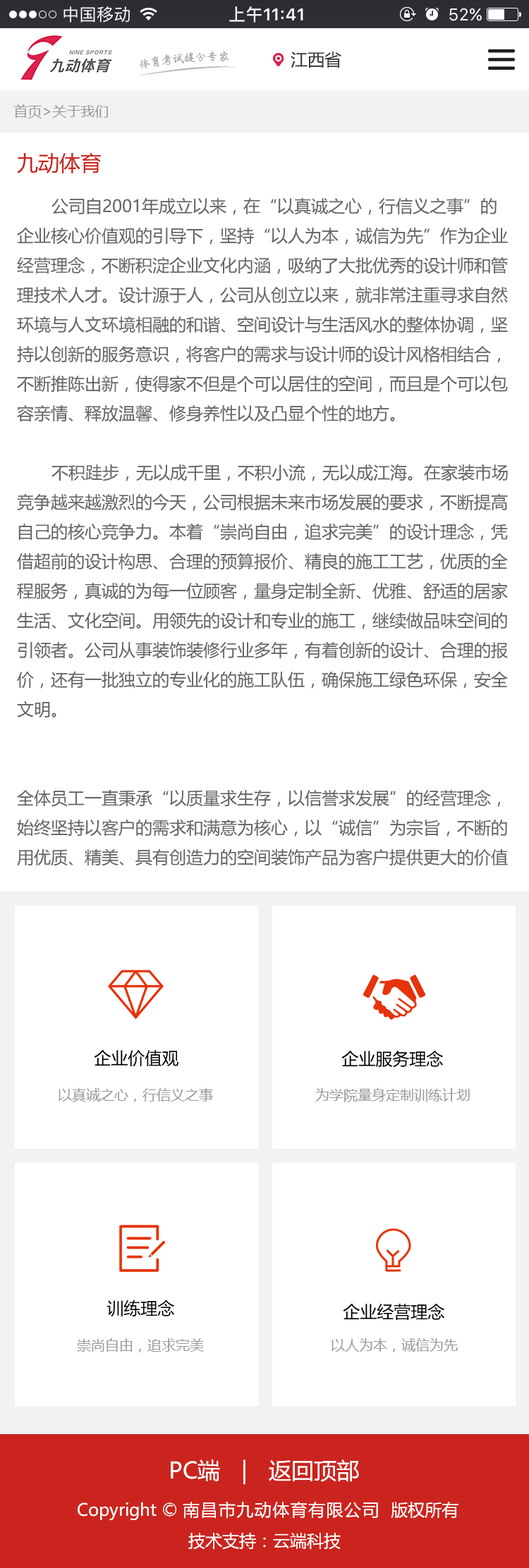
<style>
.page{position:relative;width:529px;height:1568px;background:#ffffff}
.page>*{position:absolute;margin:0}
.t1{font:11.3px "PensinkaiEG-Medium-GB";color:#8e8e8e}
.t2{font:16.9px "MicrosoftYaHei";color:#333333}
.t3{font:14.1px "MicrosoftYaHei";color:#989898}
.t4{font:21.1px "MicrosoftYaHei";color:#cb241e;text-transform:uppercase}
.t5{font:16.9px "MicrosoftYaHei";color:#666666;text-transform:uppercase}
.t6{font:16.9px "MicrosoftYaHei";color:#000000;text-transform:uppercase}
.t7{font:14.1px "MicrosoftYaHei";color:#999999;text-transform:uppercase}
.t8{font:22.6px "MicrosoftYaHei";color:#ffffff}
.t9{font:16.9px "MicrosoftYaHei";color:#ffffff}
.t10{font:16.9px "MicrosoftYaHei";letter-spacing:0.06em;color:#ffffff}
</style>
<div class="page">
<p class="t1" style="left:139px;top:51px;width:89px;height:17px;rotate:4deg">体育考试提分专家</p>
<p class="t2" style="left:290px;top:51px;width:51px;height:17px">江西省</p>
<p class="t3" style="left:13px;top:104px;width:95px;height:14px">首页&gt;关于我们</p>
<p class="t4" style="left:17px;top:153px;width:84px;height:20px">九动体育</p>
<p class="t5" style="left:17px;top:197px;width:490px;height:669px">公司自2001年成立以来，在“以真诚之心，行信义之事”的企业核心价值观的引导下，坚持“以人为本，诚信为先”作为企业经营理念，不断积淀企业文化内涵，吸纳了大批优秀的设计师和管理技术人才。设计源于人，公司从创立以来，就非常注重寻求自然环境与人文环境相融的和谐、空间设计与生活风水的整体协调，坚持以创新的服务意识，将客户的需求与设计师的设计风格相结合，不断推陈出新，使得家不但是个可以居住的空间，而且是个可以包容亲情、释放温馨、修身养性以及凸显个性的地方。<br><br>       不积跬步，无以成千里，不积小流，无以成江海。在家装市场竞争越来越激烈的今天，公司根据未来市场发展的要求，不断提高自己的核心竞争力。本着“崇尚自由，追求完美”的设计理念，凭借超前的设计构思、合理的预算报价、精良的施工工艺，优质的全程服务，真诚的为每一位顾客，量身定制全新、优雅、舒适的居家生活、文化空间。用领先的设计和专业的施工，继续做品味空间的引领者。公司从事装饰装修行业多年，有着创新的设计、合理的报价，还有一批独立的专业化的施工队伍，确保施工绿色环保，安全文明。<br><br><br>全体员工一直秉承“以质量求生存，以信誉求发展”的经营理念，始终坚持以客户的需求和满意为核心，以“诚信”为宗旨，不断的用优质、精美、具有创造力的空间装饰产品为客户提供更大的价值回报，从而使公司不断发展壮大。<br>在工程服务上，公司坚持“做一个工程树一个样板”，把每一位客户的家都当成自己的家来装修。我们都相信，做好每一次服务，不但可以提升自己的实力，赢得客户们的信赖和支持，还可以有效地提升公司的品牌知名度和美誉度，让更多的业主选择诚信居家装饰，让诚信居家装饰为更多的业主服务！</p>
<p class="t6" style="left:94px;top:1050px;width:84px;height:17px">企业价值观</p>
<p class="t6" style="left:341px;top:1050px;width:102px;height:18px">企业服务理念</p>
<p class="t7" style="left:58px;top:1088px;width:155px;height:14px">以真诚之心，行信义之事</p>
<p class="t7" style="left:315px;top:1088px;width:154px;height:14px">为学院量身定制训练计划</p>
<p class="t6" style="left:106px;top:1300px;width:68px;height:17px">训练理念</p>
<p class="t6" style="left:342px;top:1304px;width:102px;height:17px">企业经营理念</p>
<p class="t7" style="left:77px;top:1338px;width:127px;height:14px">崇尚自由，追求完美</p>
<p class="t7" style="left:331px;top:1338px;width:126px;height:14px">以人为本，诚信为先</p>
<p class="t8" style="left:171px;top:1459px;width:188px;height:26px">PC端   |   返回顶部</p>
<p class="t9" style="left:78px;top:1501px;width:380px;height:20px">Copyright © <span class="t10">南昌市九动体育有限公司 </span> 版权所有</p>
<p class="t9" style="left:188px;top:1533px;width:152px;height:17px">技术支持：云端科技</p>
</div>
